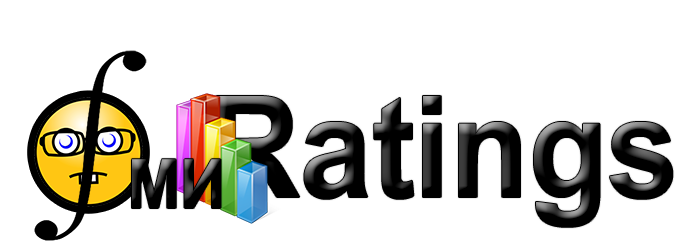
<style>
.page{position:relative;width:700px;height:250px;background:#ffffff}
.page>*{position:absolute;margin:0}
.t1{font:141px "Arial-BoldMT";scale:0.91 1}
.t2{font:68.1px "Arial-BoldMT";color:#000000;scale:0.92 1}
</style>
<div class="page">
<p class="t1" style="left:216px;top:96px;width:457px;height:131px">Ratings</p>
<p class="t2" style="left:132px;top:159px;width:89px;height:49px">МИ</p>
</div>
